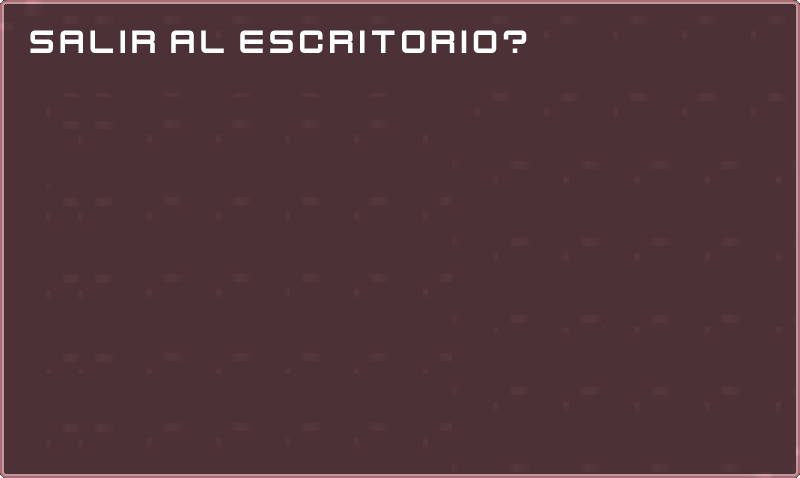
<style>
.page{position:relative;width:800px;height:478px;background:#4c3236}
.page>*{position:absolute;margin:0}
.t1{font:36px "KenVector-Future";color:#ffffff}
</style>
<div class="page">
<p class="t1" style="left:30px;top:30px;width:497px;height:23px">salir al escritorio?</p>
</div>
